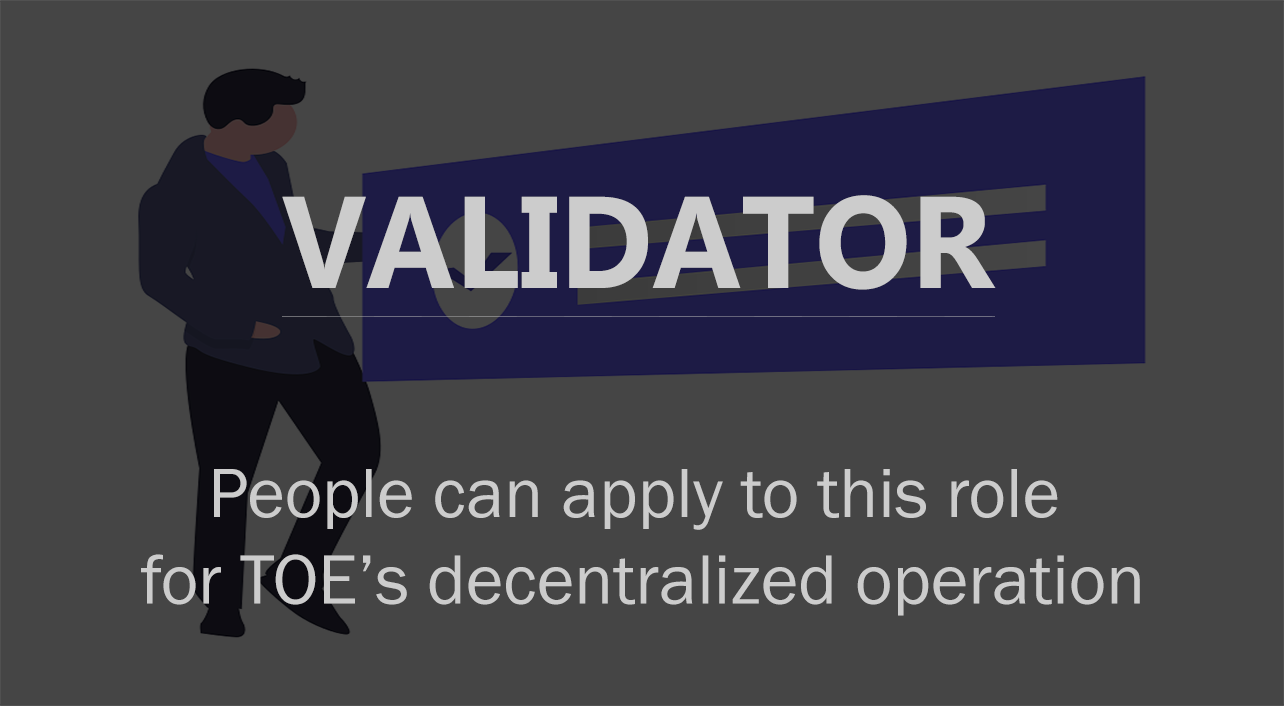
<style>
.page{position:relative;width:1284px;height:706px;background:#454545}
.page>*{position:absolute;margin:0}
.t1{font:130px "MicrosoftTaiLe-Bold";color:#cccccc}
.t2{font:72px "FranklinGothic-Book";color:#cccccc}
</style>
<div class="page">
<p class="t1" style="left:282px;top:195px;width:714px;height:95px">VALIDATOR</p>
<p class="t2" style="left:141px;top:469px;width:999px;height:147px;text-align:center">People can apply to this role <br>for TOE’s decentralized operation</p>
</div>
